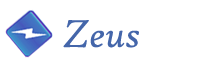
<style>
.page{position:relative;width:200px;height:60px;background:#ffffff}
.page>*{position:absolute;margin:0}
.t1{font:41.7px "HighTowerText-Italic";color:#4466aa}
</style>
<div class="page">
<p class="t1" style="left:63px;top:20px;width:76px;height:28px">Zeus</p>
</div>
